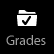
<style>
.page{position:relative;width:54px;height:54px;background:#000000}
.page>*{position:absolute;margin:0}
.t1{font:14px "MyriadPro-Regular";letter-spacing:-0.01em;color:#9e9e9e}
</style>
<div class="page">
<p class="t1" style="left:6px;top:35px;width:40px;height:10px">Grades</p>
</div>
